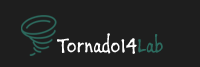
<style>
.page{position:relative;width:200px;height:67px;background:#1e1e1e}
.page>*{position:absolute;margin:0}
.t1{font:22px "BuxtonSketch";color:#fefefe}
.t2{font:22px "BuxtonSketch";color:#2c6a5e}
</style>
<div class="page">
<p class="t1" style="left:57px;top:33px;width:106px;height:21px">Tornado14<span class="t2">Lab</span></p>
</div>
